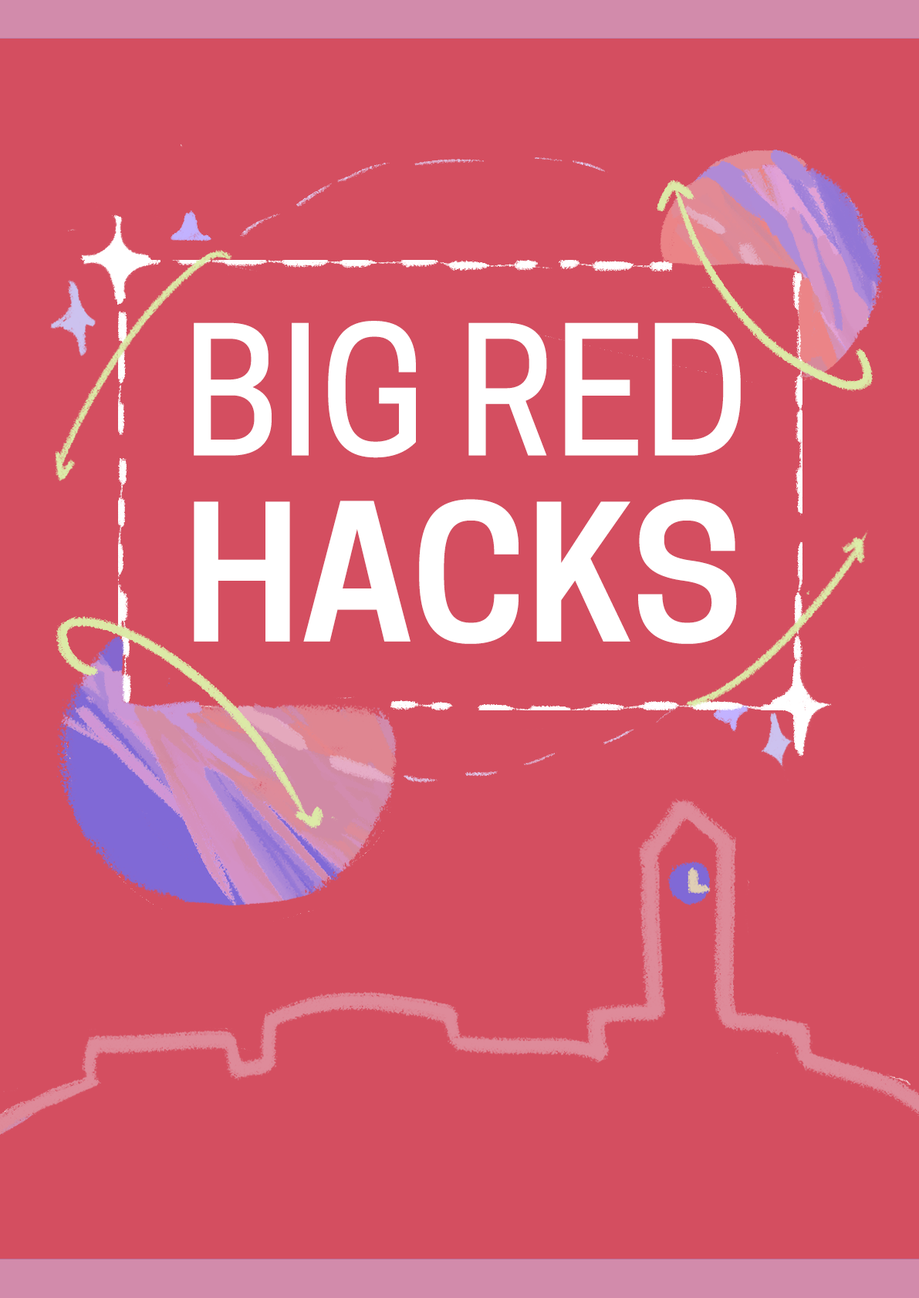
<style>
.page{position:relative;width:919px;height:1298px;background:#d44e60}
.page>*{position:absolute;margin:0}
.t1{font:169.6px/186.1px "CooperHewitt-Medium";color:#ffffff;scale:0.95 1}
.t2{font:179.1px/186.1px "CooperHewitt-Semibold";color:#ffffff}
</style>
<div class="page">
<p class="t1" style="left:194px;top:321px;width:546px;height:323px">BIG RED<br><span class="t2">HACKS</span></p>
</div>
